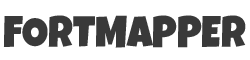
<style>
.page{position:relative;width:250px;height:60px;background:#ffffff}
.page>*{position:absolute;margin:0}
.t1{font:44px "LuckiestGuy-Regular";color:#393939;scale:0.93 1}
</style>
<div class="page">
<p class="t1" style="left:3px;top:15px;width:243px;height:33px">FORTMAPPER</p>
</div>
